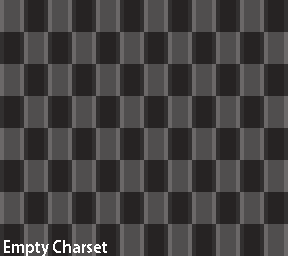
<style>
.page{position:relative;width:288px;height:256px;background:#262323}
.page>*{position:absolute;margin:0}
.t1{font:16px "KozGoPr6N-Bold";color:#ffffff}
</style>
<div class="page">
<p class="t1" style="left:4px;top:240px;width:103px;height:17px">Empty Charset</p>
</div>
